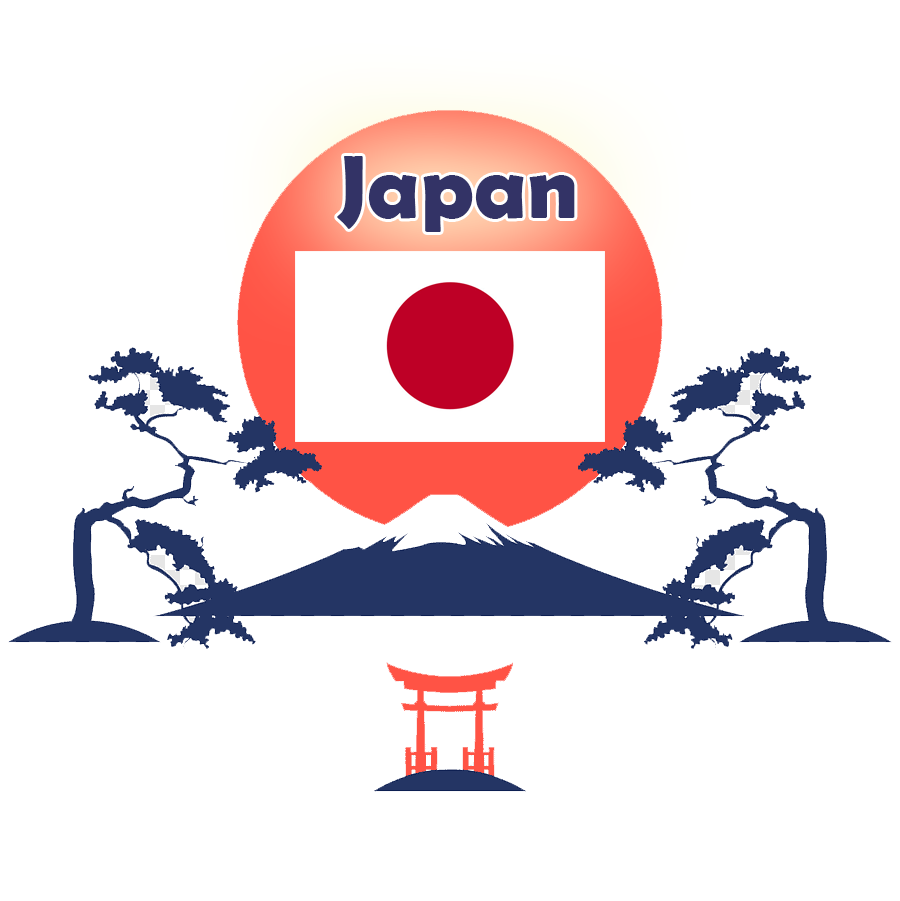
<style>
.page{position:relative;width:900px;height:901px;background:#ffffff}
.page>*{position:absolute;margin:0}
.t1{font:90px "BerlinSansFBDemi-Bold";color:#333366}
</style>
<div class="page">
<p class="t1" style="left:337px;top:156px;width:238px;height:76px">Japan</p>
</div>
